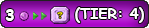
<style>
.page{position:relative;width:149px;height:28px}
.page>*{position:absolute;margin:0}
.t1{font:12px "ComicSansMS-Bold";color:#ffffff}
.t2{font:14.7px "ComicSansMS-Bold";color:#ffffff}
</style>
<div class="page">
<p class="t1" style="left:5px;top:9px;width:9px;height:12px">3</p>
<p class="t2" style="left:75px;top:7px;width:69px;height:16px">(TIER: 4)</p>
</div>
